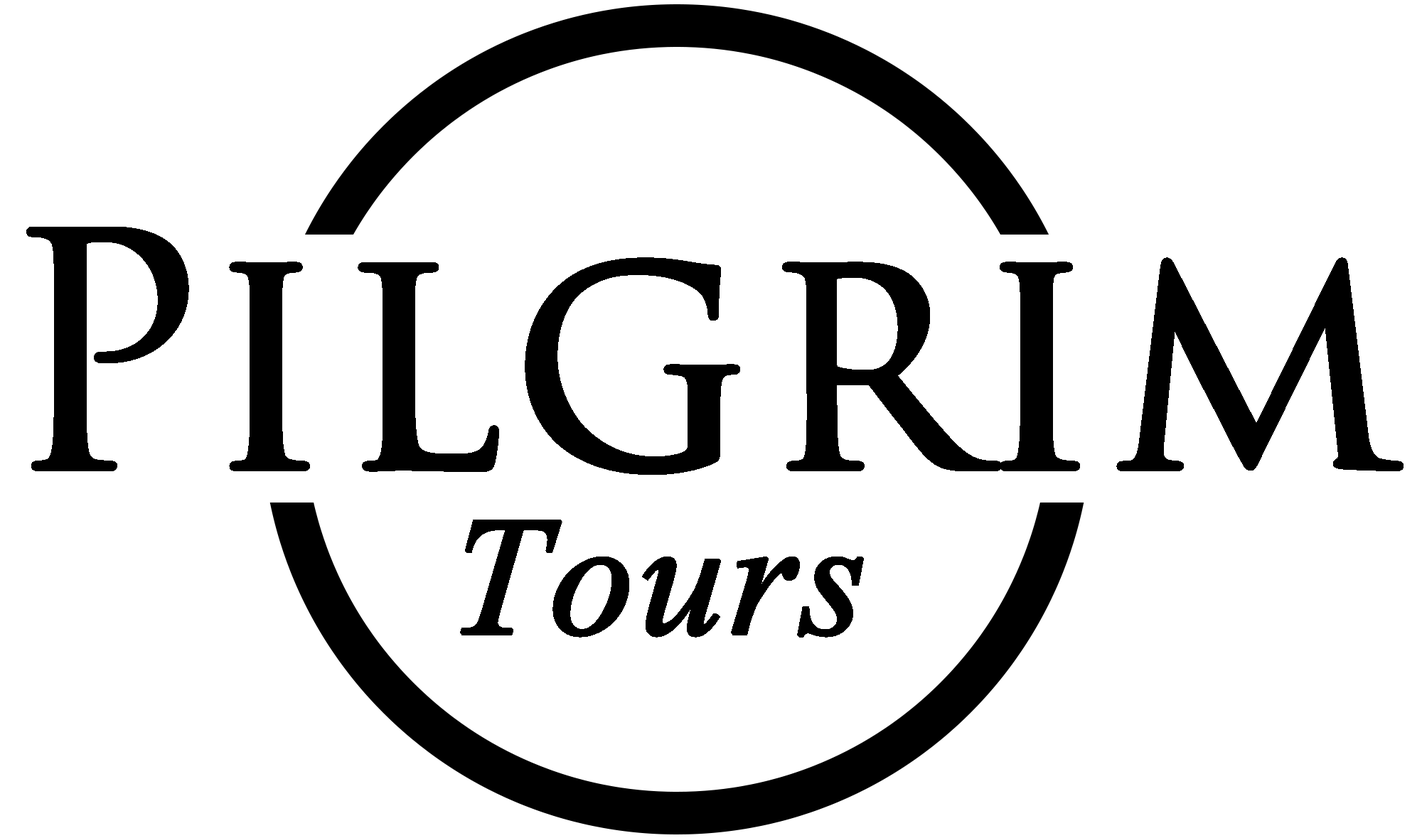
<style>
.page{position:relative;width:1422px;height:838px;background:#ffffff}
.page>*{position:absolute;margin:0}
.t1{font:316.9px "TrajanPro3-Regular";color:#000000;font-weight:bold}
.t2{font:209.3px "Vijaya";color:#000000;font-weight:bold}
</style>
<div class="page">
<p class="t1" style="left:26px;top:227px;width:1378px;height:248px">Pilgrim</p>
<p class="t2" style="left:460px;top:520px;width:404px;height:118px">Tours</p>
</div>
